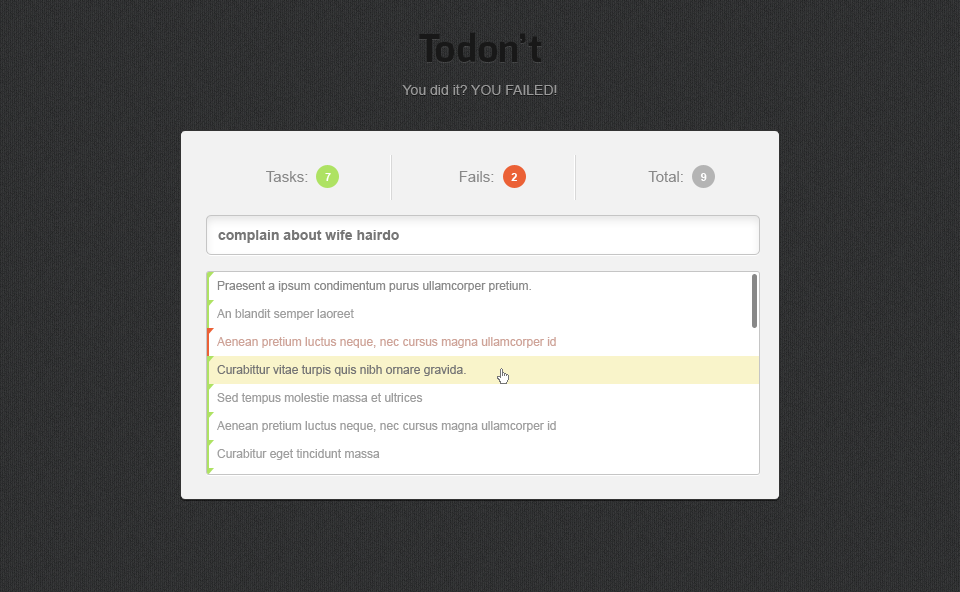
<style>
.page{position:relative;width:960px;height:592px}
.page>*{position:absolute;margin:0}
.t1{font:38px "Exo-Bold";color:#181818}
.t2{font:14px "ArialMT";color:#999999}
.t3{font:15px "ArialMT";color:#888888}
.t4{font:11px "Arial-BoldMT";color:#ffffff}
.t5{font:14px "Arial-BoldMT";color:#767676}
.t6{font:12px "ArialMT";color:#898989}
.t7{font:12px "ArialMT";color:#9e9e9e}
.t8{font:12px "ArialMT";color:#cea398}
.t9{font:12px "ArialMT";color:#757575}
</style>
<div class="page">
<p class="t1" style="left:419px;top:32px;width:123px;height:30px">Todon’t</p>
<p class="t2" style="left:402px;top:84px;width:155px;height:11px">You did it? YOU FAILED!</p>
<p class="t3" style="left:266px;top:171px;width:65px;height:11px">Tasks:    <span class="t4">7</span></p>
<p class="t3" style="left:459px;top:171px;width:58px;height:11px">Fails:    <span class="t4">2</span></p>
<p class="t3" style="left:648px;top:171px;width:59px;height:11px">Total:    <span class="t4">9</span></p>
<p class="t5" style="left:218px;top:230px;width:181px;height:13px">complain about wife hairdo</p>
<p class="t6" style="left:217px;top:281px;width:314px;height:11px">Praesent a ipsum condimentum purus ullamcorper pretium.</p>
<p class="t7" style="left:217px;top:309px;width:137px;height:11px">An blandit semper laoreet</p>
<p class="t8" style="left:217px;top:337px;width:339px;height:11px">Aenean pretium luctus neque, nec cursus magna ullamcorper id</p>
<p class="t9" style="left:217px;top:365px;width:249px;height:11px">Curabittur vitae turpis quis nibh ornare gravida.</p>
<p class="t7" style="left:217px;top:393px;width:206px;height:11px">Sed tempus molestie massa et ultrices</p>
<p class="t7" style="left:217px;top:421px;width:339px;height:11px">Aenean pretium luctus neque, nec cursus magna ullamcorper id</p>
<p class="t7" style="left:217px;top:449px;width:163px;height:11px">Curabitur eget tincidunt massa</p>
</div>
